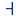
<style>
.page{position:relative;width:16px;height:16px;background:#ffffff}
.page>*{position:absolute;margin:0}
.t1{font:18px "Helvetica";color:#0e3284}
</style>
<div class="page">
<p class="t1" style="left:6px;top:2px;width:7px;height:13px;rotate:180deg">꜔</p>
</div>
